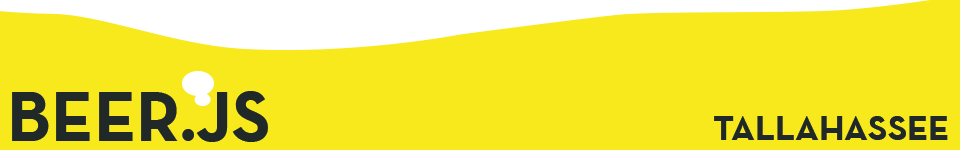
<style>
.page{position:relative;width:960px;height:150px;background:#f7e91b}
.page>*{position:absolute;margin:0}
.t1{font:72px "NeutraTextTF-BoldAlt";color:#212828}
.t2{font:36px "NeutraTextTF-BoldAlt";color:#212828}
</style>
<div class="page">
<p class="t1" style="left:12px;top:91px;width:256px;height:51px">BEER.JS</p>
<p class="t2" style="left:714px;top:116px;width:234px;height:24px">TALLAHASSEE</p>
</div>
